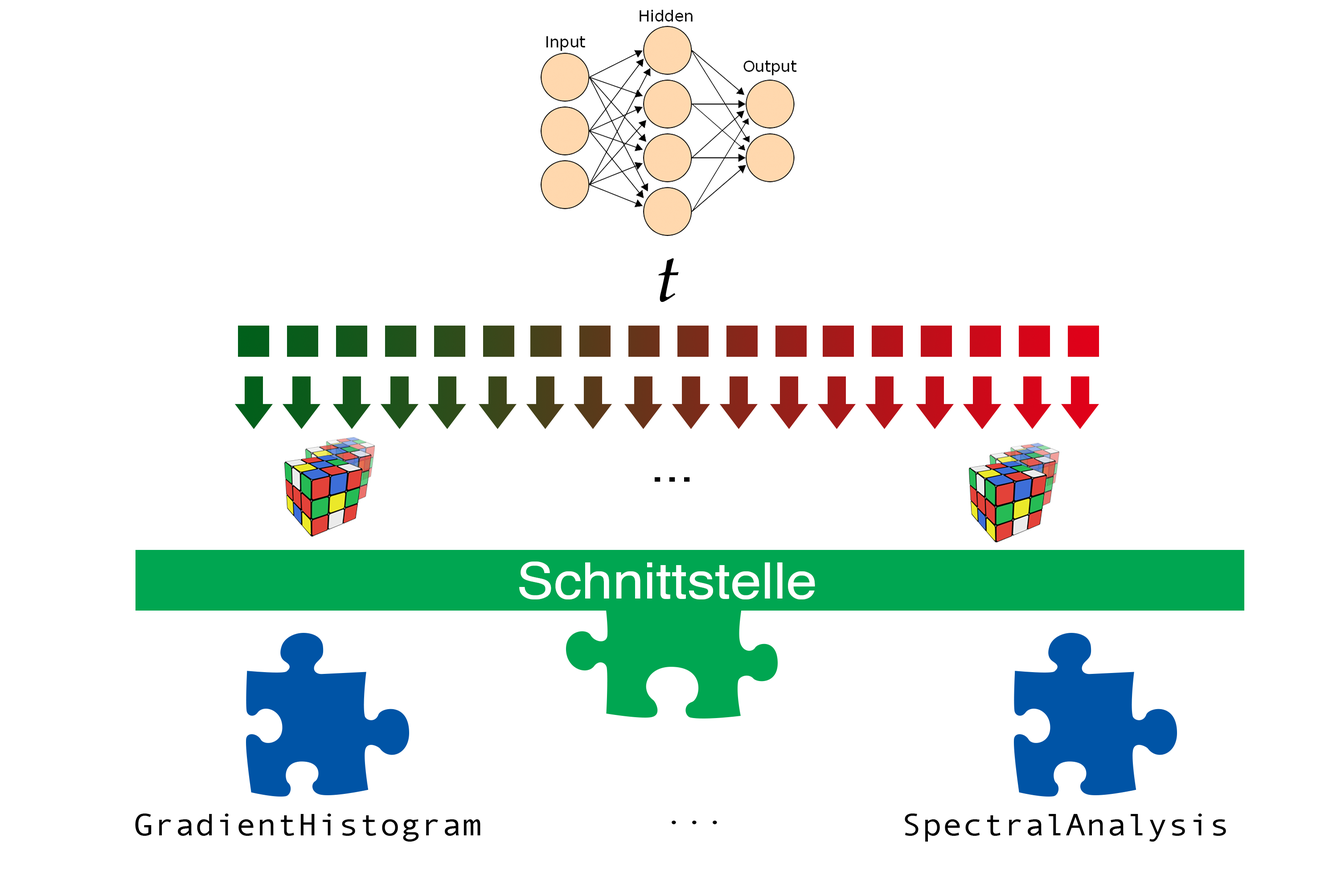
<style>
.page{position:relative;width:1337px;height:892px;background:#ffffff}
.page>*{position:absolute;margin:0}
.t1{font:66.9px "Palatino-Italic";color:#000000;scale:1.11 1}
.t2{font:47.5px "Helvetica";color:#000000;scale:1.11 1}
.t3{font:50.2px "Helvetica";color:#ffffff;scale:1.11 1}
.t4{font:30.8px "AndaleMono";color:#000000;scale:1.11 1}
</style>
<div class="page">
<p class="t1" style="left:658px;top:258px;width:21px;height:44px">t</p>
<p class="t2" style="left:655px;top:477px;width:35px;height:4px">...</p>
<p class="t3" style="left:519px;top:561px;width:296px;height:38px">Schnittstelle</p>
<p class="t4" style="left:135px;top:813px;width:346px;height:28px">GradientHistogram</p>
<p class="t4" style="left:672px;top:820px;width:45px;height:4px">...</p>
<p class="t4" style="left:905px;top:813px;width:321px;height:28px">SpectralAnalysis</p>
</div>
